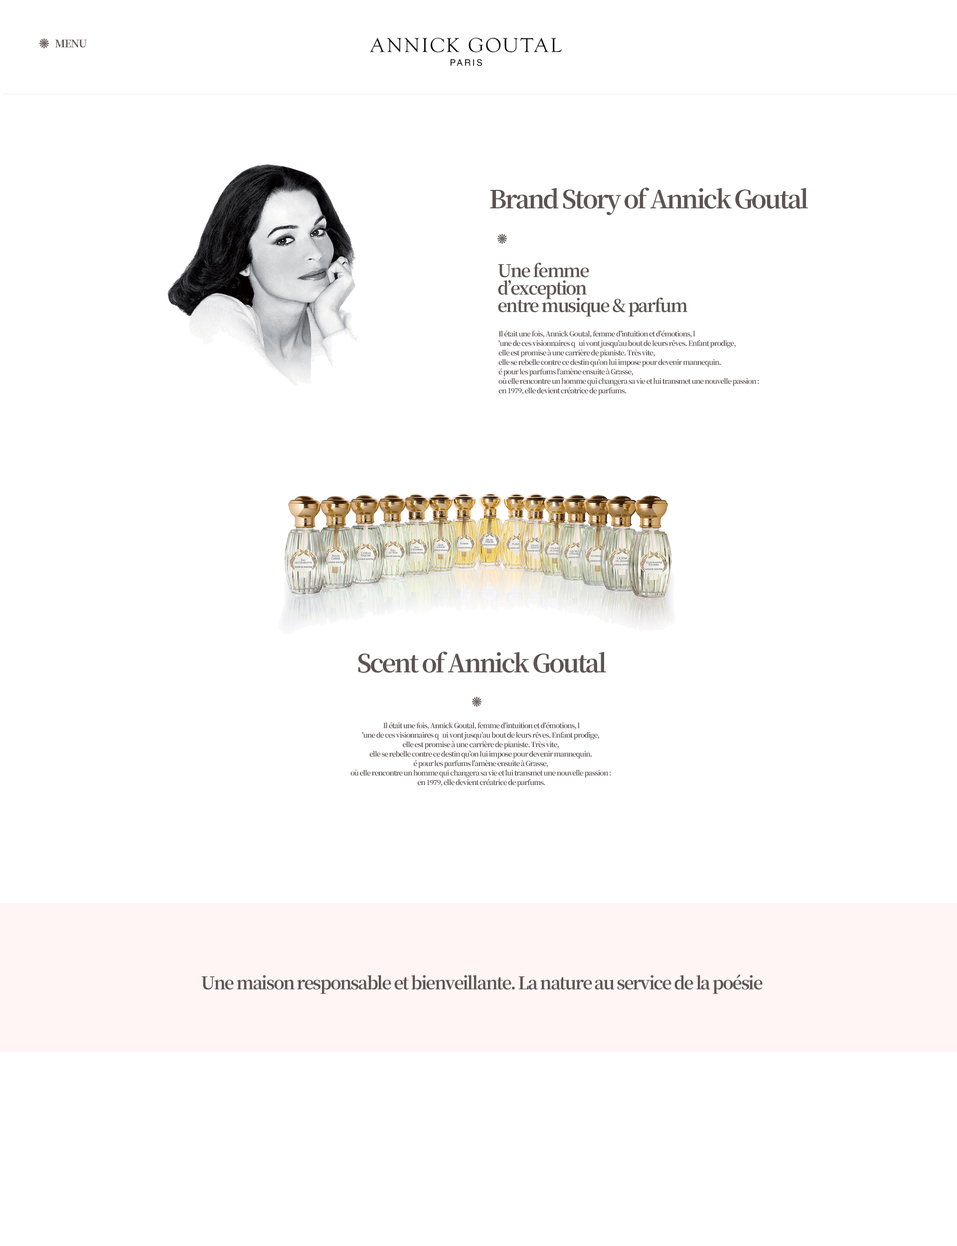
<style>
.page{position:relative;width:957px;height:1246px;background:#ffffff}
.page>*{position:absolute;margin:0}
.t1{font:10.5px "NotoSerifCJKkr-Bold";letter-spacing:-0.075em;color:#5d5353}
.t2{font:24.9px "NotoSerifCJKkr-Bold";letter-spacing:-0.075em;color:#5d5353}
.t3{font:17.4px/17.4px "NotoSerifCJKkr-Bold";letter-spacing:-0.075em;color:#5d5353}
.t4{font:7px/9.5px "NotoSerifCJKkr-Bold";letter-spacing:-0.075em;color:#5d5353}
.t5{font:17.4px "NotoSerifCJKkr-Bold";letter-spacing:-0.075em;color:#5d5353}
</style>
<div class="page">
<p class="t1" style="left:55px;top:39px;width:32px;height:9px">MENU</p>
<p class="t2" style="left:490px;top:187px;width:318px;height:28px">Brand Story of Annick Goutal</p>
<p class="t3" style="left:498px;top:263px;width:190px;height:53px">Une femme <br>d’exception <br>entre musique &amp; parfum</p>
<p class="t4" style="left:498px;top:330px;width:261px;height:65px">Il était une fois, Annick Goutal, femme d’intuition et d’émotions, l<br>'une de ces visionnaires q   ui vont jusqu’au bout de leurs rêves. Enfant prodige, <br>elle est promise à une carrière de pianiste. Très vite, <br>elle se rebelle contre ce destin qu’on lui impose pour devenir mannequin. <br>é pour les parfums l’amène ensuite à Grasse, <br>où elle rencontre un homme qui changera sa vie et lui transmet une nouvelle passion : <br>en 1979, elle devient créatrice de parfums.</p>
<p class="t2" style="left:358px;top:651px;width:248px;height:22px">Scent of Annick Goutal</p>
<p class="t4" style="left:350px;top:722px;width:261px;height:65px;text-align:center">Il était une fois, Annick Goutal, femme d’intuition et d’émotions, l<br>'une de ces visionnaires q   ui vont jusqu’au bout de leurs rêves. Enfant prodige, <br>elle est promise à une carrière de pianiste. Très vite, <br>elle se rebelle contre ce destin qu’on lui impose pour devenir mannequin. <br>é pour les parfums l’amène ensuite à Grasse, <br>où elle rencontre un homme qui changera sa vie et lui transmet une nouvelle passion : <br>en 1979, elle devient créatrice de parfums.</p>
<p class="t5" style="left:201px;top:974px;width:562px;height:20px">Une maison responsable et bienveillante. La nature au service de la poésie</p>
</div>
